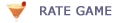
<style>
.page{position:relative;width:121px;height:23px;background:#ffffff}
.page>*{position:absolute;margin:0}
.t1{font:12px "Verdana";color:#636388;font-weight:bold}
</style>
<div class="page">
<p class="t1" style="left:40px;top:6px;width:72px;height:10px">RATE GAME</p>
</div>
